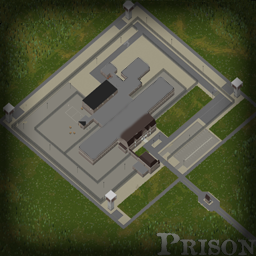
<style>
.page{position:relative;width:256px;height:256px}
.page>*{position:absolute;margin:0}
.t1{font:28.4px "AtticAntique";font-variant:small-caps;font-weight:bold}
</style>
<div class="page">
<p class="t1" style="left:156px;top:232px;width:100px;height:24px">Prison</p>
</div>
